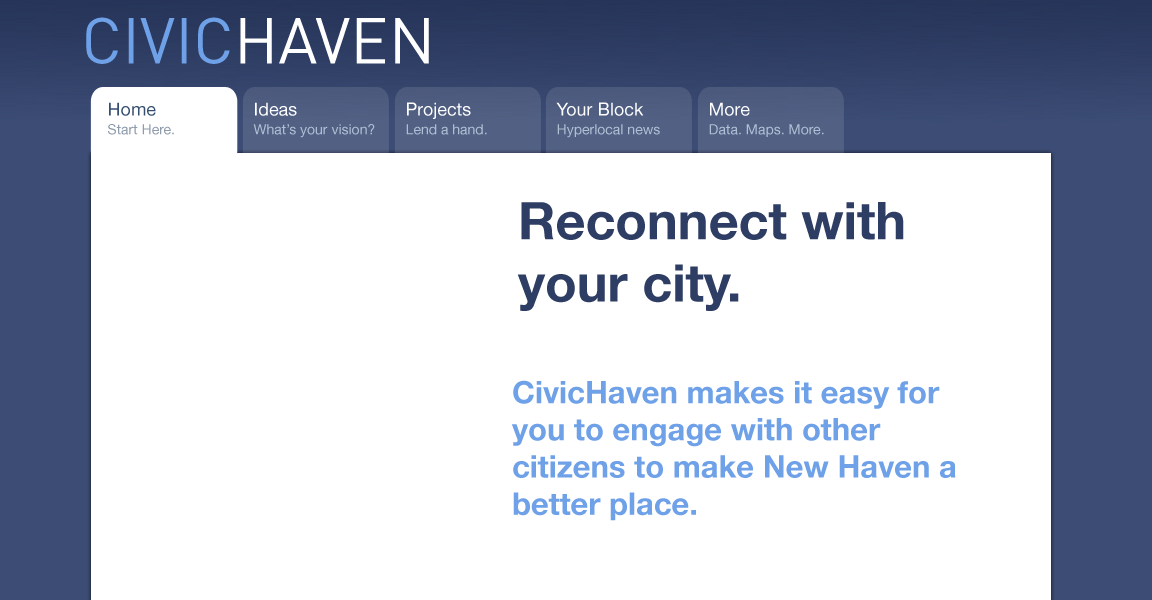
<style>
.page{position:relative;width:1152px;height:600px;background:#ffffff}
.page>*{position:absolute;margin:0}
.t1{font:64px "DIN-Regular";color:#6ea1e7}
.t2{font:64px "DIN-Regular";color:#ffffff}
.t3{font:18px "HelveticaNeue";color:#354e6f}
.t4{font:18px "HelveticaNeue";color:#fefefe}
.t5{font:14px "HelveticaNeue";color:#8e9bac}
.t6{font:14px "HelveticaNeue";color:#afbfd4}
.t7{font:52px "HelveticaNeue-Bold";color:#2e3d63}
.t8{font:31px "HelveticaNeue-Bold";color:#6ea1e7}
</style>
<div class="page">
<p class="t1" style="left:86px;top:17px;width:343px;height:47px">CIVIC<span class="t2">HAVEN</span></p>
<p class="t3" style="left:109px;top:102px;width:47px;height:14px">Home</p>
<p class="t4" style="left:255px;top:102px;width:42px;height:14px">Ideas</p>
<p class="t4" style="left:407px;top:102px;width:64px;height:17px">Projects</p>
<p class="t4" style="left:556px;top:102px;width:88px;height:14px">Your Block</p>
<p class="t4" style="left:710px;top:102px;width:40px;height:14px">More</p>
<p class="t5" style="left:108px;top:124px;width:66px;height:11px">Start Here.</p>
<p class="t6" style="left:253px;top:124px;width:122px;height:14px">What’s your vision?</p>
<p class="t6" style="left:406px;top:124px;width:81px;height:11px">Lend a hand.</p>
<p class="t6" style="left:557px;top:124px;width:103px;height:14px">Hyperlocal news</p>
<p class="t6" style="left:709px;top:124px;width:115px;height:13px">Data. Maps. More.</p>
<p class="t7" style="left:517px;top:202px;width:387px;height:109px">Reconnect with <br>your city.</p>
<p class="t8" style="left:511px;top:380px;width:445px;height:141px">CivicHaven makes it easy for you to engage with other <br>citizens to make New Haven a better place.</p>
</div>
